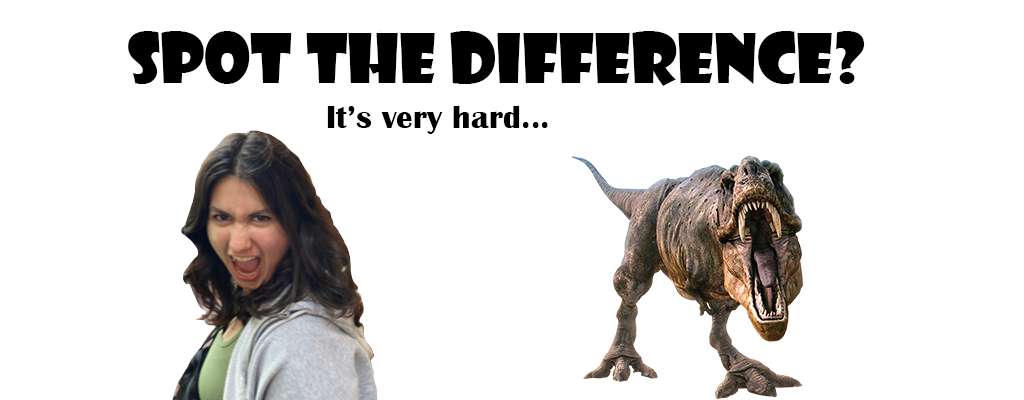
<style>
.page{position:relative;width:1024px;height:400px;background:#ffffff}
.page>*{position:absolute;margin:0}
.t1{font:66.7px "ShowcardGothic-Reg";color:#000000}
.t2{font:33.3px "BritannicBold";color:#000000}
</style>
<div class="page">
<p class="t1" style="left:128px;top:31px;width:737px;height:55px">Spot the Difference?</p>
<p class="t2" style="left:327px;top:105px;width:221px;height:29px">It’s very hard...</p>
</div>
